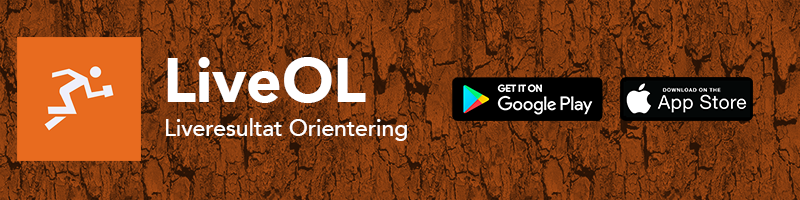
<style>
.page{position:relative;width:800px;height:200px}
.page>*{position:absolute;margin:0}
.t1{font:62px "Avenir-Black";color:#ffffff}
.t2{font:23px "Avenir-Medium";color:#ffffff}
</style>
<div class="page">
<p class="t1" style="left:167px;top:57px;width:199px;height:46px">LiveOL</p>
<p class="t2" style="left:166px;top:118px;width:241px;height:23px">Liveresultat Orientering</p>
</div>
